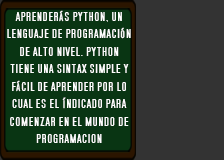
<style>
.page{position:relative;width:224px;height:160px;background:#333333}
.page>*{position:absolute;margin:0}
.t1{font:14.6px "SFMoviePoster";color:#fefefe;scale:1.03 1}
</style>
<div class="page">
<p class="t1" style="left:7px;top:10px;width:124px;height:133px;text-align:center">aprenderás python, un lenguaje de programación de alto nivel. python tiene una sintax simple y fácil de aprender por lo cual es el índicado para comenzar en el mundo de programacion</p>
</div>
